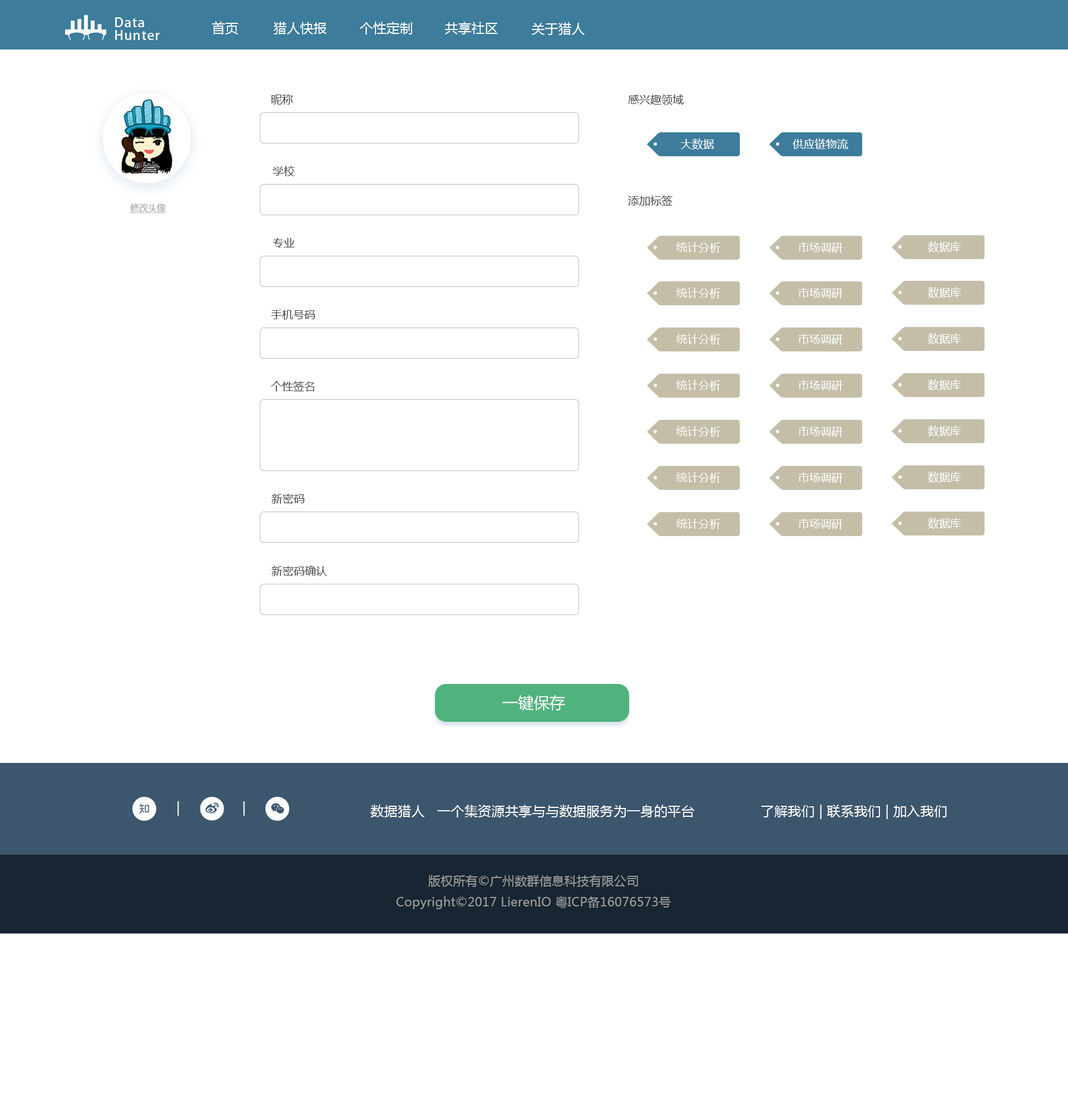
<style>
.page{position:relative;width:1068px;height:1116px;background:#ffffff}
.page>*{position:absolute;margin:0}
.t1{font:13.2px/12.6px "AdobeHeitiStd-Regular";letter-spacing:0.06em;color:#ffffff}
.t2{font:13.4px "MicrosoftYaHei";color:#ffffff}
.t3{font:11.1px "MicrosoftYaHei";color:#434343}
.t4{font:11.1px "MicrosoftYaHei";color:#ffffff}
.t5{font:8.9px "MicrosoftYaHei-Bold";color:#b5b5b5;text-decoration:underline}
.t6{font:15.7px "MicrosoftYaHei";color:#ffffff}
.t7{font:13.4px "MicrosoftYaHei";letter-spacing:0.015em;color:#ffffff}
.t8{font:12.2px "MicrosoftYaHei";letter-spacing:0.015em;color:#9b9b9b}
</style>
<div class="page">
<p class="t1" style="left:115px;top:17px;width:45px;height:23px">Data<br>Hunter</p>
<p class="t2" style="left:212px;top:21px;width:26px;height:13px">首页</p>
<p class="t2" style="left:274px;top:22px;width:53px;height:12px">猎人快报</p>
<p class="t2" style="left:359px;top:22px;width:53px;height:12px">个性定制</p>
<p class="t2" style="left:445px;top:22px;width:53px;height:12px">共享社区</p>
<p class="t2" style="left:532px;top:22px;width:53px;height:13px">关于猎人</p>
<p class="t3" style="left:271px;top:94px;width:22px;height:11px">昵称</p>
<p class="t3" style="left:628px;top:95px;width:56px;height:10px">感兴趣领域</p>
<p class="t4" style="left:681px;top:139px;width:33px;height:11px">大数据</p>
<p class="t4" style="left:793px;top:139px;width:55px;height:11px">供应链物流</p>
<p class="t3" style="left:273px;top:166px;width:22px;height:10px">学校</p>
<p class="t3" style="left:628px;top:195px;width:45px;height:11px">添加标签</p>
<p class="t5" style="left:130px;top:204px;width:36px;height:10px">修改头像</p>
<p class="t3" style="left:273px;top:238px;width:22px;height:10px">专业</p>
<p class="t4" style="left:676px;top:242px;width:45px;height:11px">统计分析</p>
<p class="t4" style="left:798px;top:242px;width:45px;height:11px">市场调研</p>
<p class="t4" style="left:928px;top:241px;width:33px;height:12px">数据库</p>
<p class="t4" style="left:676px;top:288px;width:45px;height:11px">统计分析</p>
<p class="t4" style="left:798px;top:288px;width:45px;height:11px">市场调研</p>
<p class="t4" style="left:928px;top:287px;width:33px;height:11px">数据库</p>
<p class="t3" style="left:271px;top:310px;width:44px;height:10px">手机号码</p>
<p class="t4" style="left:676px;top:334px;width:45px;height:11px">统计分析</p>
<p class="t4" style="left:798px;top:334px;width:45px;height:11px">市场调研</p>
<p class="t4" style="left:928px;top:333px;width:33px;height:11px">数据库</p>
<p class="t3" style="left:271px;top:381px;width:43px;height:11px">个性签名</p>
<p class="t4" style="left:676px;top:380px;width:45px;height:11px">统计分析</p>
<p class="t4" style="left:798px;top:380px;width:45px;height:11px">市场调研</p>
<p class="t4" style="left:928px;top:379px;width:33px;height:12px">数据库</p>
<p class="t4" style="left:928px;top:426px;width:33px;height:11px">数据库</p>
<p class="t4" style="left:676px;top:426px;width:45px;height:11px">统计分析</p>
<p class="t4" style="left:798px;top:426px;width:45px;height:11px">市场调研</p>
<p class="t4" style="left:676px;top:472px;width:45px;height:11px">统计分析</p>
<p class="t4" style="left:798px;top:472px;width:45px;height:11px">市场调研</p>
<p class="t4" style="left:928px;top:472px;width:33px;height:11px">数据库</p>
<p class="t3" style="left:271px;top:493px;width:34px;height:11px">新密码</p>
<p class="t4" style="left:676px;top:518px;width:45px;height:12px">统计分析</p>
<p class="t4" style="left:798px;top:518px;width:45px;height:12px">市场调研</p>
<p class="t4" style="left:928px;top:518px;width:33px;height:11px">数据库</p>
<p class="t3" style="left:271px;top:566px;width:56px;height:10px">新密码确认</p>
<p class="t6" style="left:502px;top:695px;width:63px;height:16px">一键保存</p>
<p class="t7" style="left:370px;top:805px;width:325px;height:13px">数据猎人   一个集资源共享与与数据服务为一身的平台</p>
<p class="t7" style="left:761px;top:805px;width:186px;height:14px">了解我们 | 联系我们 | 加入我们</p>
<p class="t8" style="left:396px;top:875px;width:275px;height:35px;text-align:center">版权所有©广州数群信息科技有限公司<br>Copyright©2017 LierenIO 粤ICP备16076573号</p>
</div>
